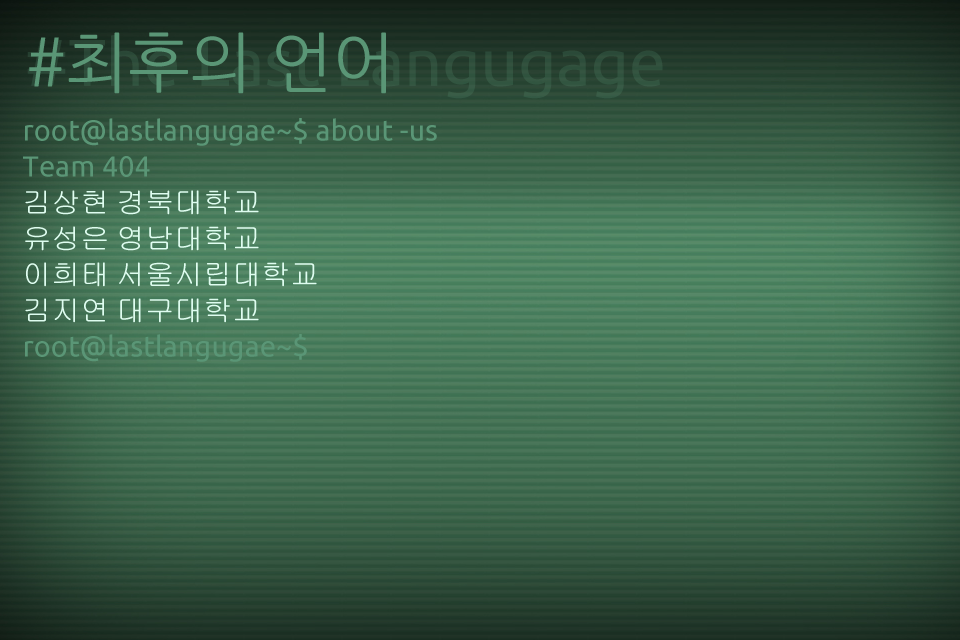
<style>
.page{position:relative;width:960px;height:640px}
.page>*{position:absolute;margin:0}
.t1{font:66px "NanumGothic";color:#5a9676}
.t2{font:29px/36px "Gulim";color:#dffdf0}
.t3{font:29px/36px "Ubuntu";color:#5a9676}
</style>
<div class="page">
<p class="t1" style="left:29px;top:32px;width:357px;height:62px">#최후의 언어</p>
<p class="t2" style="left:23px;top:118px;width:414px;height:244px"><span class="t3">root@lastlangugae~$ about -us<br>Team 404<br></span>김상현 경북대학교<br>유성은 영남대학교<br>이희태 서울시립대학교<br>김지연 대구대학교<br><span class="t3">root@lastlangugae~$</span></p>
</div>
